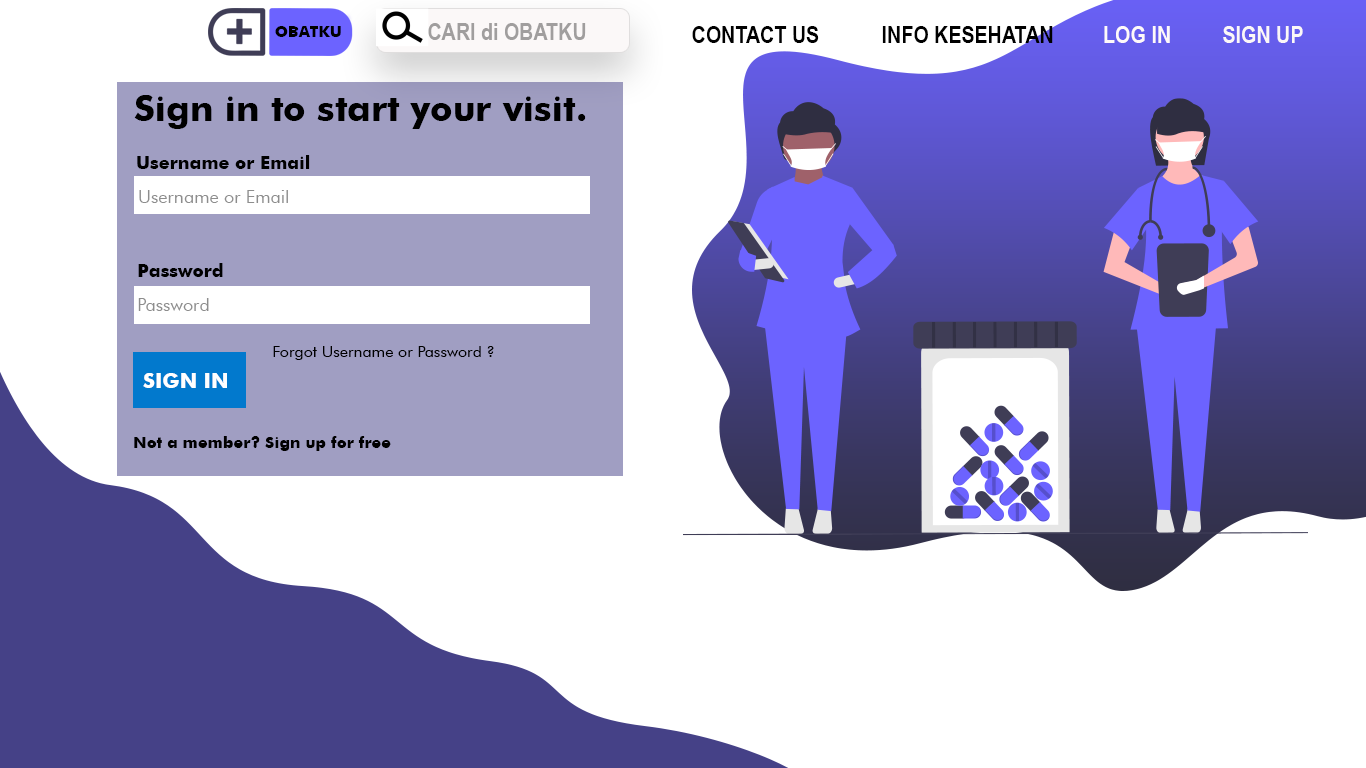
<style>
.page{position:relative;width:1366px;height:768px;background:#ffffff}
.page>*{position:absolute;margin:0}
.t1{font:15.6px "Futura-Bold";color:#000000}
.t2{font:24px "ArialNarrow-Bold";color:#a09e9e}
.t3{font:24px "ArialNarrow-Bold";color:#000000}
.t4{font:24px "ArialNarrow-Bold";color:#fef9f9}
.t5{font:24px "ArialNarrow-Bold";color:#fbf7f7}
.t6{font:36px "Futura-Bold";color:#000000}
.t7{font:18px "Futura-Bold";color:#000000}
.t8{font:18px "FuturaBT-Book";color:#8d8d8d}
.t9{font:16px "FuturaBT-Book";color:#000000}
.t10{font:20.6px "Futura-Bold";color:#ffffff}
.t11{font:16px "Futura-Bold";color:#000000}
</style>
<div class="page">
<p class="t1" style="left:275px;top:26px;width:66px;height:11px">OBATKU</p>
<p class="t2" style="left:428px;top:23px;width:158px;height:17px">CARI di OBATKU</p>
<p class="t3" style="left:692px;top:26px;width:127px;height:17px">CONTACT US</p>
<p class="t3" style="left:882px;top:26px;width:171px;height:17px">INFO KESEHATAN</p>
<p class="t4" style="left:1104px;top:26px;width:66px;height:17px">LOG IN</p>
<p class="t5" style="left:1223px;top:26px;width:80px;height:17px">SIGN UP</p>
<p class="t6" style="left:134px;top:95px;width:452px;height:34px">Sign in to start your visit.</p>
<p class="t7" style="left:137px;top:155px;width:173px;height:14px">Username or Email</p>
<p class="t8" style="left:139px;top:190px;width:149px;height:13px">Username or Email</p>
<p class="t7" style="left:138px;top:263px;width:85px;height:14px">Password</p>
<p class="t8" style="left:138px;top:298px;width:71px;height:13px">Password</p>
<p class="t9" style="left:273px;top:346px;width:221px;height:14px">Forgot Username or Password ?</p>
<p class="t10" style="left:143px;top:373px;width:84px;height:15px">SIGN IN</p>
<p class="t11" style="left:134px;top:436px;width:257px;height:15px">Not a member? Sign up for free</p>
</div>
